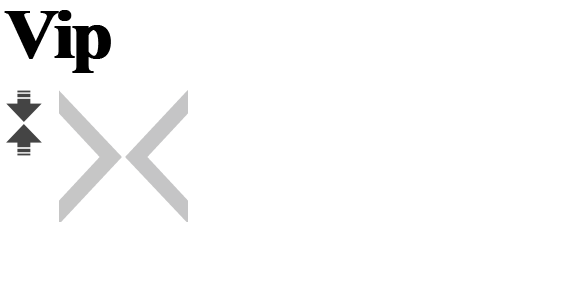
<style>
.page{position:relative;width:583px;height:304px;background:#ffffff}
.page>*{position:absolute;margin:0}
.t1{font:68.9px "TimesNewRomanPS-BoldMT";letter-spacing:-0.06em;color:#000000;font-weight:bold;scale:1.08 1}
</style>
<div class="page">
<p class="t1" style="left:4px;top:10px;width:107px;height:63px">Vip</p>
</div>
